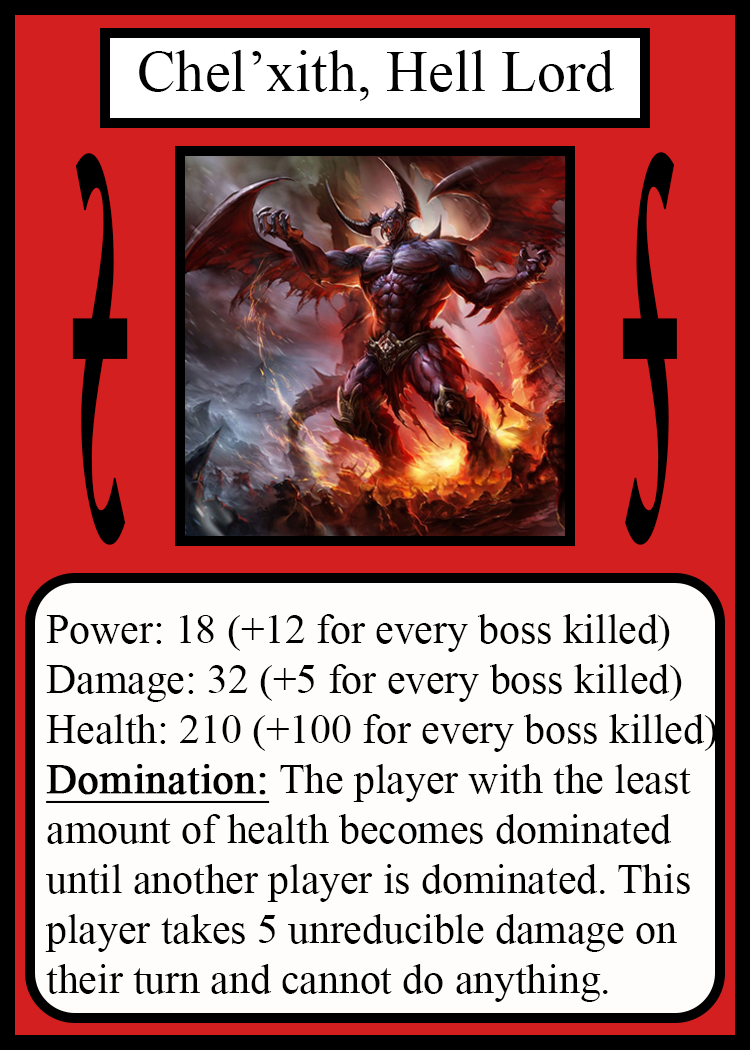
<style>
.page{position:relative;width:750px;height:1050px;background:#fffcfc}
.page>*{position:absolute;margin:0}
.t1{font:58.3px "TimesNewRomanPSMT";color:#010101}
.t2{font:814.3px "Apple-Chancery";color:#000000;font-weight:bold;scale:0.17 1}
.t3{font:814.6px "Apple-Chancery";color:#000000;font-weight:bold;scale:0.17 1}
.t4{font:41.7px "TimesNewRomanPSMT";color:#000000}
.t5{font:41.7px "TimesNewRomanPSMT";color:#000000;font-weight:bold;text-decoration:underline}
</style>
<div class="page">
<p class="t1" style="left:139px;top:50px;width:476px;height:51px">Chel’xith, Hell Lord</p>
<p class="t2" style="left:72px;top:153px;width:56px;height:392px;rotate:180deg">s</p>
<p class="t3" style="left:622px;top:152px;width:55px;height:393px">s</p>
<p class="t4" style="left:45px;top:614px;width:672px;height:388px">Power: 18 (+12 for every boss killed)<br>Damage: 32 (+5 for every boss killed)<br>Health: 210 (+100 for every boss killed)<br><span class="t5">Domination:</span> The player with the least <br>amount of health becomes dominated<br>until another player is dominated. This<br>player takes 5 unreducible damage on<br>their turn and cannot do anything.</p>
</div>
